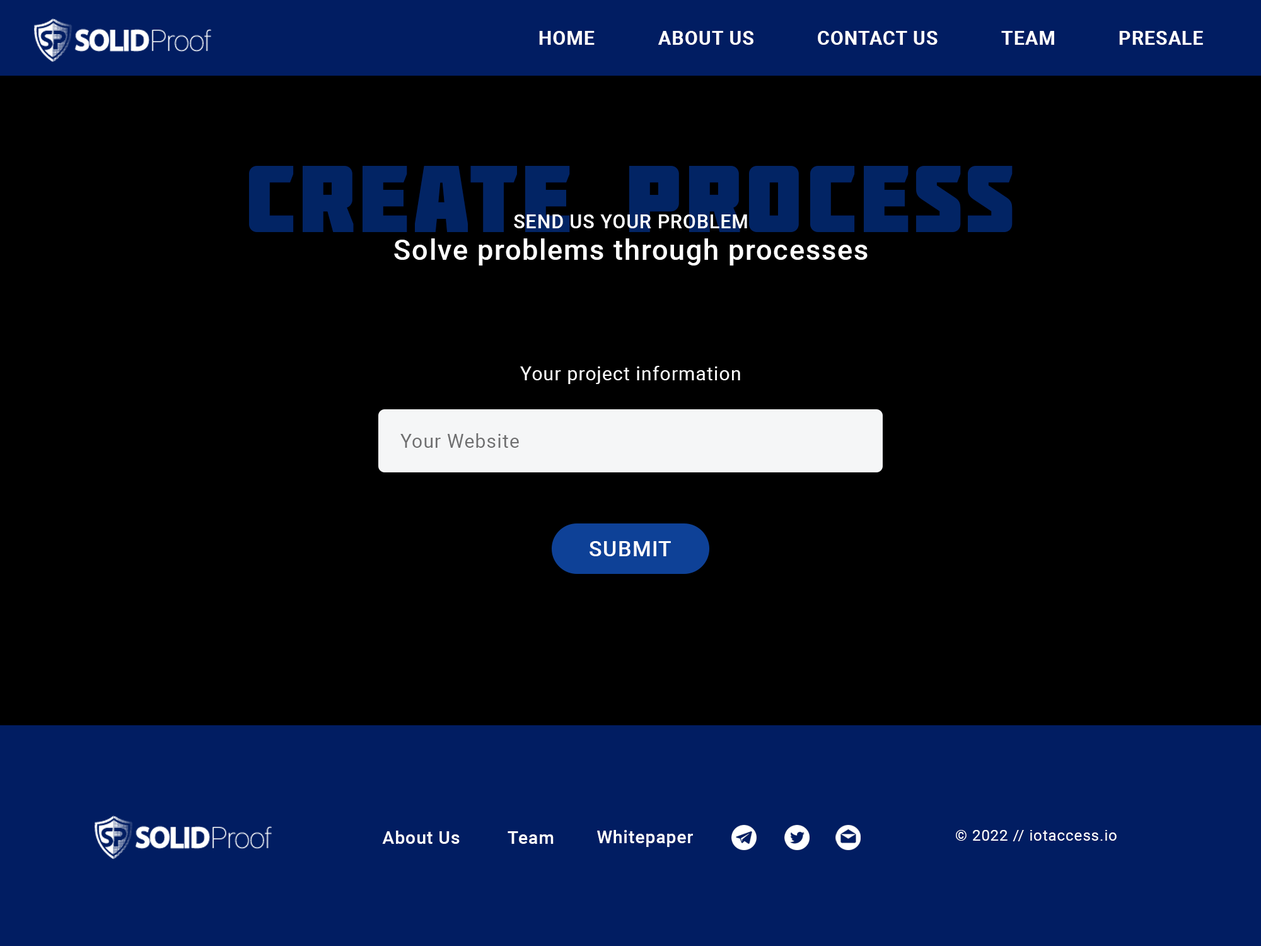
<style>
.page{position:relative;width:1261px;height:946px;background:#000000}
.page>*{position:absolute;margin:0}
.t1{font:18.9px "Roboto-Bold";letter-spacing:0.04em;color:#ffffff}
.t2{font:94.6px "Molot";letter-spacing:0.04em;color:#022464}
.t3{font:28.4px/31.5px "Roboto-Medium";letter-spacing:0.04em;color:#ffffff}
.t4{font:18.9px/31.5px "Roboto-Medium";letter-spacing:0.04em;color:#ffffff;text-transform:uppercase}
.t5{font:18.9px "Roboto-Regular";letter-spacing:0.04em;color:#ffffff}
.t6{font:18.9px "Roboto-Regular";letter-spacing:0.04em;color:#6f6f70}
.t7{font:21.4px "Roboto-Medium";letter-spacing:0.04em;color:#ffffff;text-transform:uppercase}
.t8{font:17.7px "Roboto-Medium";letter-spacing:0.04em;color:#ffffff}
.t9{font:15.1px "Roboto-Regular";letter-spacing:0.04em;color:#ffffff}
</style>
<div class="page">
<p class="t1" style="left:539px;top:31px;width:56px;height:14px">HOME</p>
<p class="t1" style="left:658px;top:31px;width:95px;height:14px">ABOUT US</p>
<p class="t1" style="left:818px;top:31px;width:119px;height:14px">CONTACT US</p>
<p class="t1" style="left:1001px;top:31px;width:53px;height:14px">TEAM</p>
<p class="t1" style="left:1119px;top:31px;width:84px;height:14px">PRESALE</p>
<p class="t2" style="left:249px;top:166px;width:764px;height:66px">Create process</p>
<p class="t3" style="left:394px;top:214px;width:474px;height:51px;text-align:center"><span class="t4">Send us your problem<br></span>Solve problems through processes</p>
<p class="t5" style="left:520px;top:366px;width:220px;height:18px">Your project information</p>
<p class="t6" style="left:400px;top:433px;width:119px;height:15px">Your Website</p>
<p class="t7" style="left:589px;top:541px;width:82px;height:15px">submit</p>
<p class="t8" style="left:382px;top:830px;width:78px;height:14px">About Us</p>
<p class="t8" style="left:508px;top:831px;width:46px;height:13px">Team</p>
<p class="t8" style="left:597px;top:830px;width:96px;height:17px">Whitepaper</p>
<p class="t9" style="left:956px;top:830px;width:161px;height:11px">© 2022 // iotaccess.io</p>
</div>
